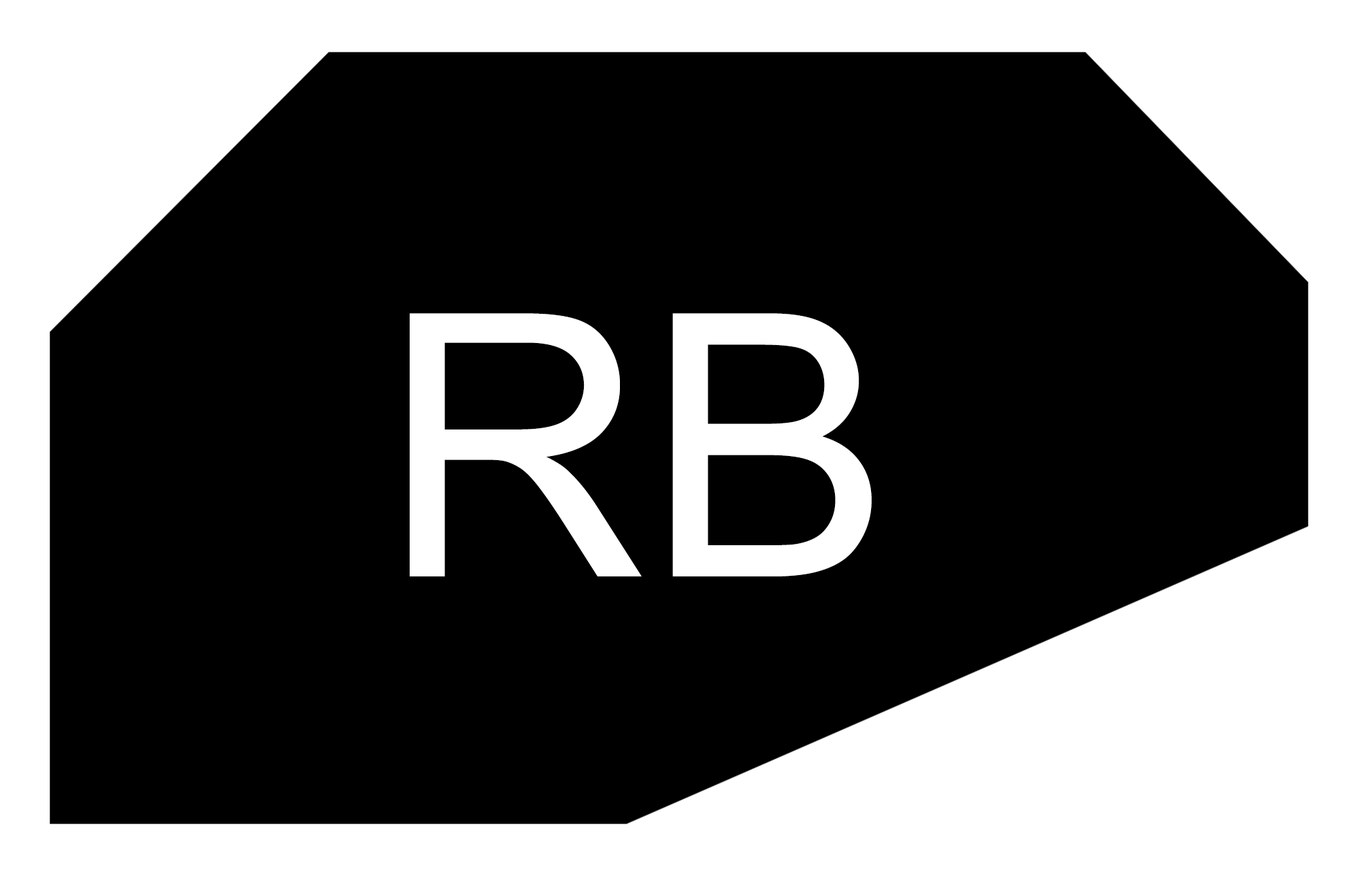
<style>
.page{position:relative;width:1361px;height:876px;background:#000000}
.page>*{position:absolute;margin:0}
.t1{font:367.1px "ArialMT";color:#ffffff}
</style>
<div class="page">
<p class="t1" style="left:410px;top:313px;width:462px;height:263px">RB</p>
</div>
